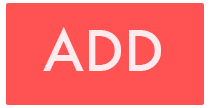
<style>
.page{position:relative;width:210px;height:108px;background:#ff5252}
.page>*{position:absolute;margin:0}
.t1{font:55.3px "Futura-Medium";color:#ffebee}
</style>
<div class="page">
<p class="t1" style="left:43px;top:27px;width:118px;height:44px">ADD</p>
</div>
